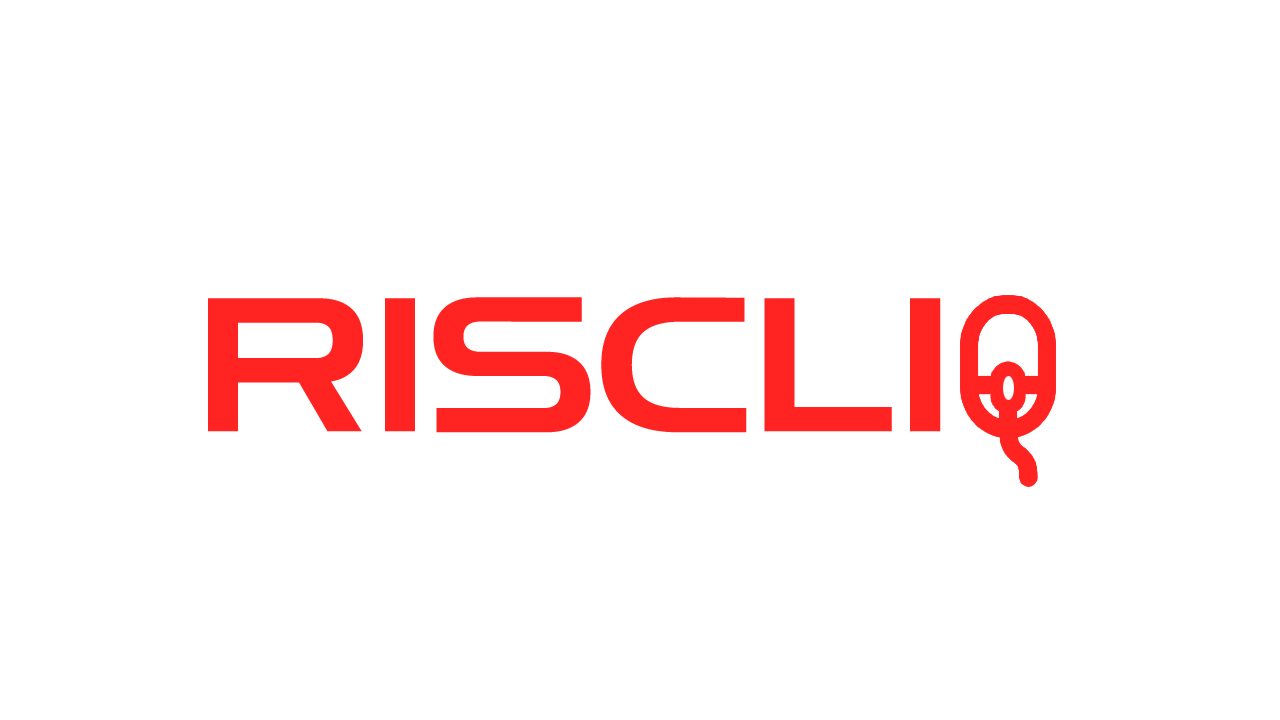
<style>
.page{position:relative;width:1280px;height:720px;background:#ffffff}
.page>*{position:absolute;margin:0}
.t1{font:185.7px "ZenDots-Regular";color:#ff2322}
</style>
<div class="page">
<p class="t1" style="left:208px;top:297px;width:733px;height:136px">RISCLI</p>
</div>
